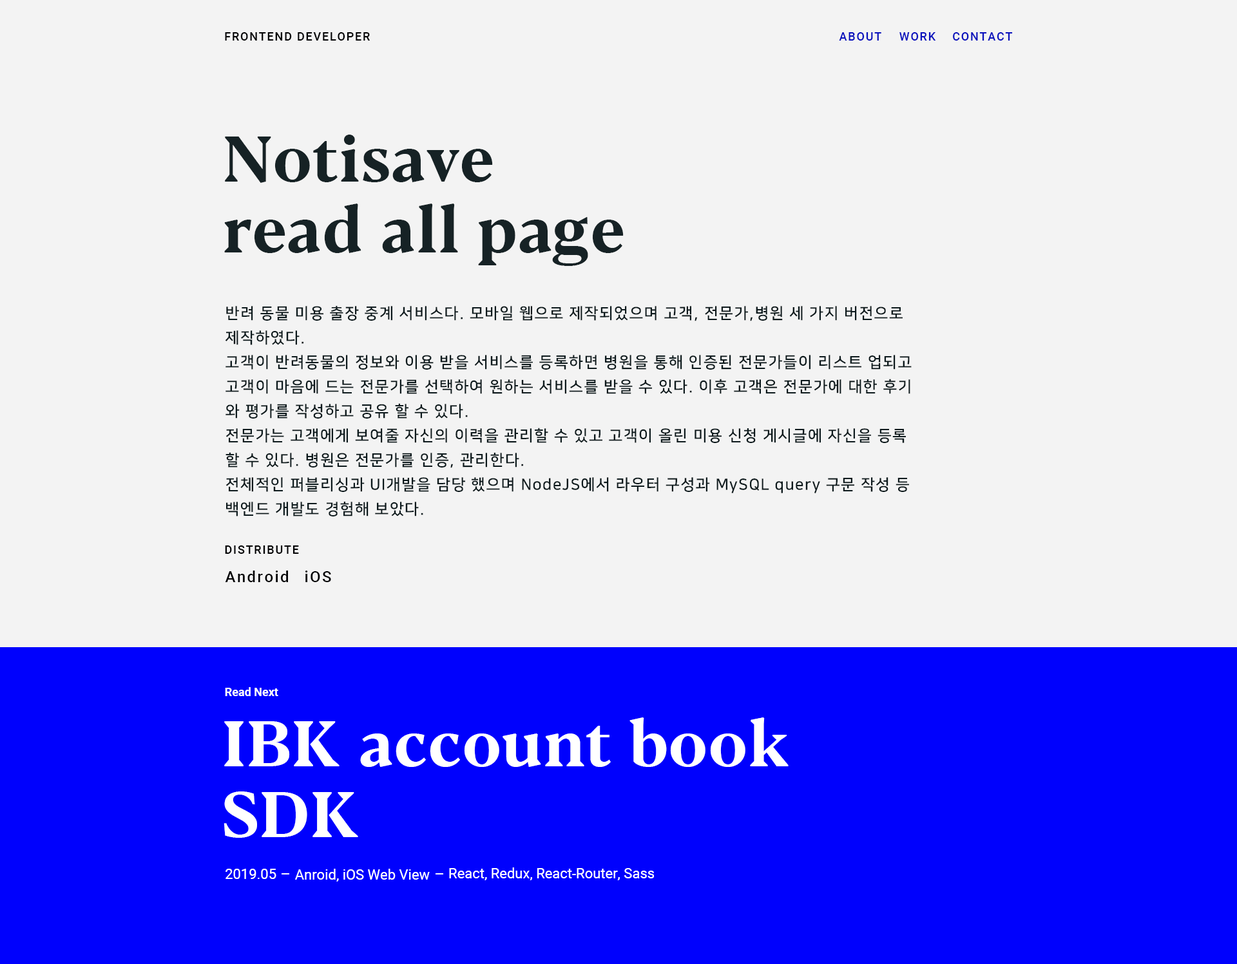
<style>
.page{position:relative;width:1237px;height:964px;background:#f3f3f3}
.page>*{position:absolute;margin:0}
.t1{font:11.6px "Roboto-Medium";letter-spacing:0.1em;color:#000002}
.t2{font:11.6px "Roboto-Medium";letter-spacing:0.1em;color:#0911bd}
.t3{font:64.4px/70.9px "BlackerText-Bold";color:#162225}
.t4{font:15.5px/24.5px "NanumSquareB";letter-spacing:0.06em;color:#0c191c}
.t5{font:15.5px "Roboto-Medium";letter-spacing:0.1em;color:#000002}
.t6{font:11.6px "Roboto-Bold";color:#ffffff}
.t7{font:64.4px/70.9px "BlackerText-Bold";color:#ffffff}
.t8{font:14.2px "Roboto-Regular";color:#ffffff}
</style>
<div class="page">
<p class="t1" style="left:225px;top:32px;width:145px;height:9px">FRONTEND DEVELOPER</p>
<p class="t2" style="left:839px;top:32px;width:42px;height:9px">ABOUT</p>
<p class="t2" style="left:899px;top:32px;width:37px;height:9px">WORK</p>
<p class="t2" style="left:953px;top:32px;width:60px;height:9px">CONTACT</p>
<p class="t3" style="left:224px;top:135px;width:399px;height:131px">Notisave <br>read all page</p>
<p class="t4" style="left:225px;top:306px;width:686px;height:211px">반려 동물 미용 출장 중계 서비스다. 모바일 웹으로 제작되었으며 고객, 전문가,병원 세 가지 버전으로<br>제작하였다.<br>고객이 반려동물의 정보와 이용 받을 서비스를 등록하면 병원을 통해 인증된 전문가들이 리스트 업되고<br>고객이 마음에 드는 전문가를 선택하여 원하는 서비스를 받을 수 있다. 이후 고객은 전문가에 대한 후기<br>와 평가를 작성하고 공유 할 수 있다.<br>전문가는 고객에게 보여줄 자신의 이력을 관리할 수 있고 고객이 올린 미용 신청 게시글에 자신을 등록<br>할 수 있다. 병원은 전문가를 인증, 관리한다.<br>전체적인 퍼블리싱과 UI개발을 담당 했으며 NodeJS에서 라우터 구성과 MySQL query 구문 작성 등<br>백엔드 개발도 경험해 보았다.</p>
<p class="t1" style="left:225px;top:546px;width:74px;height:8px">DISTRIBUTE</p>
<p class="t5" style="left:225px;top:571px;width:63px;height:11px">Android</p>
<p class="t5" style="left:305px;top:571px;width:26px;height:11px">iOS</p>
<p class="t6" style="left:225px;top:687px;width:53px;height:9px">Read Next</p>
<p class="t7" style="left:224px;top:718px;width:564px;height:120px">IBK account book<br>SDK</p>
<p class="t8" style="left:225px;top:869px;width:51px;height:10px">2019.05</p>
<p class="t8" style="left:295px;top:869px;width:135px;height:13px">Anroid, iOS Web View</p>
<p class="t8" style="left:449px;top:868px;width:205px;height:12px">React, Redux, React-Router, Sass</p>
</div>
